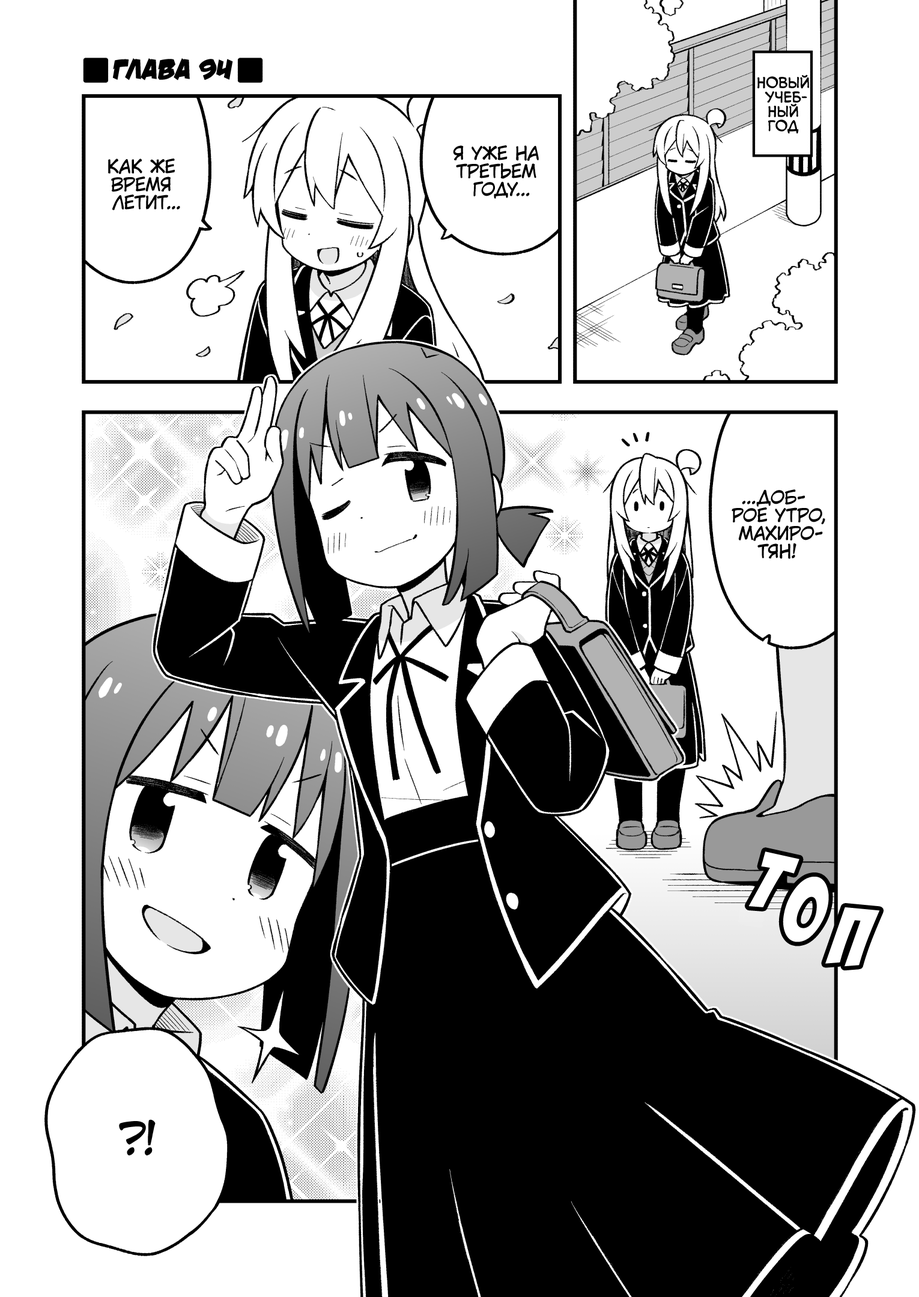
<style>
.page{position:relative;width:919px;height:1297px;background:#ffffff}
.page>*{position:absolute;margin:0}
.t1{font:28.8px "v_DamnNoisyKids";color:#000000;text-transform:uppercase}
.t2{font:14.4px "v_CCMonologous";color:#000000;text-transform:uppercase}
.t3{font:18px "KuraiVoice2";color:#000000;text-transform:uppercase}
.t4{font:90.1px "BadaBoom";color:#ffffff}
.t5{font:43.2px "KuraiVoice2";color:#000000;text-transform:uppercase}
</style>
<div class="page">
<p class="t1" style="left:112px;top:58px;width:121px;height:22px">Глава 94</p>
<p class="t2" style="left:757px;top:74px;width:52px;height:60px;text-align:center">Новый<br>учеб-<br>ный<br>год</p>
<p class="t3" style="left:453px;top:145px;width:86px;height:54px;text-align:center">Я уже на<br>третьем<br>году...</p>
<p class="t3" style="left:108px;top:159px;width:72px;height:51px;text-align:center">Как же<br>время<br>летит...</p>
<p class="t3" style="left:732px;top:490px;width:93px;height:69px;text-align:center">...Доб-<br>рое утро,<br>Махиро-<br>тян!</p>
<p class="t4" style="left:748px;top:852px;width:52px;height:56px;rotate:19deg">т</p>
<p class="t4" style="left:783px;top:877px;width:46px;height:65px">о</p>
<p class="t4" style="left:825px;top:908px;width:55px;height:59px;rotate:10deg">п</p>
<p class="t5" style="left:119px;top:1120px;width:37px;height:36px">?!</p>
</div>
